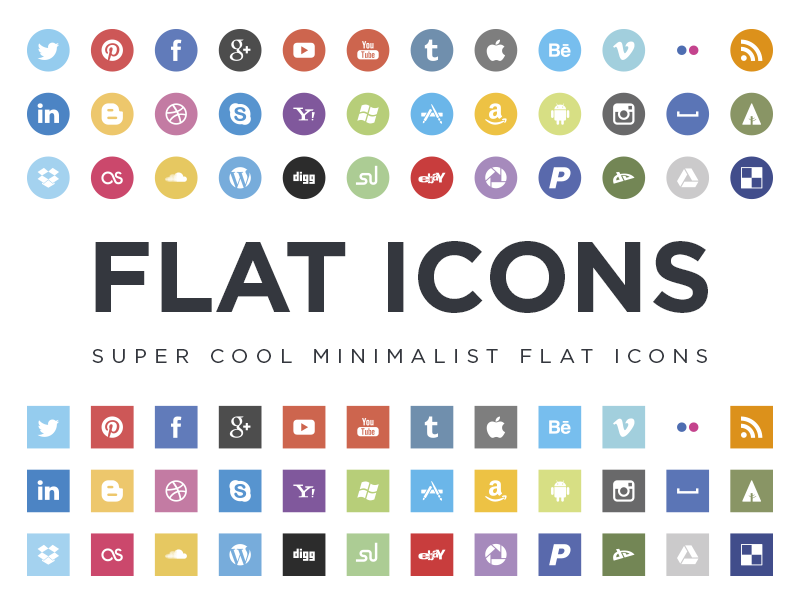
<style>
.page{position:relative;width:800px;height:600px;background:#ffffff}
.page>*{position:absolute;margin:0}
.t1{font:100px "Gotham-Bold";color:#34373e}
.t2{font:20px "Gotham-Book";letter-spacing:0.36em;color:#34373e}
</style>
<div class="page">
<p class="t1" style="left:95px;top:241px;width:613px;height:72px">FLAT ICONS</p>
<p class="t2" style="left:92px;top:349px;width:615px;height:14px">SUPER COOL MINIMALIST FLAT ICONS</p>
</div>
